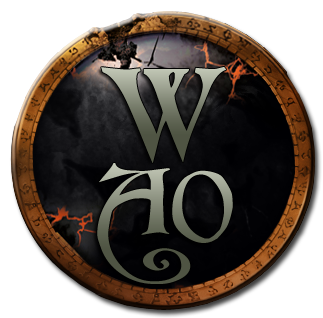
<style>
.page{position:relative;width:323px;height:318px;background:#ffffff}
.page>*{position:absolute;margin:0}
.t1{font:130px "Folkard"}
.t2{font:90px "Folkard"}
</style>
<div class="page">
<p class="t1" style="left:101px;top:66px;width:125px;height:97px">W</p>
<p class="t2" style="left:97px;top:163px;width:136px;height:121px">AO</p>
</div>
